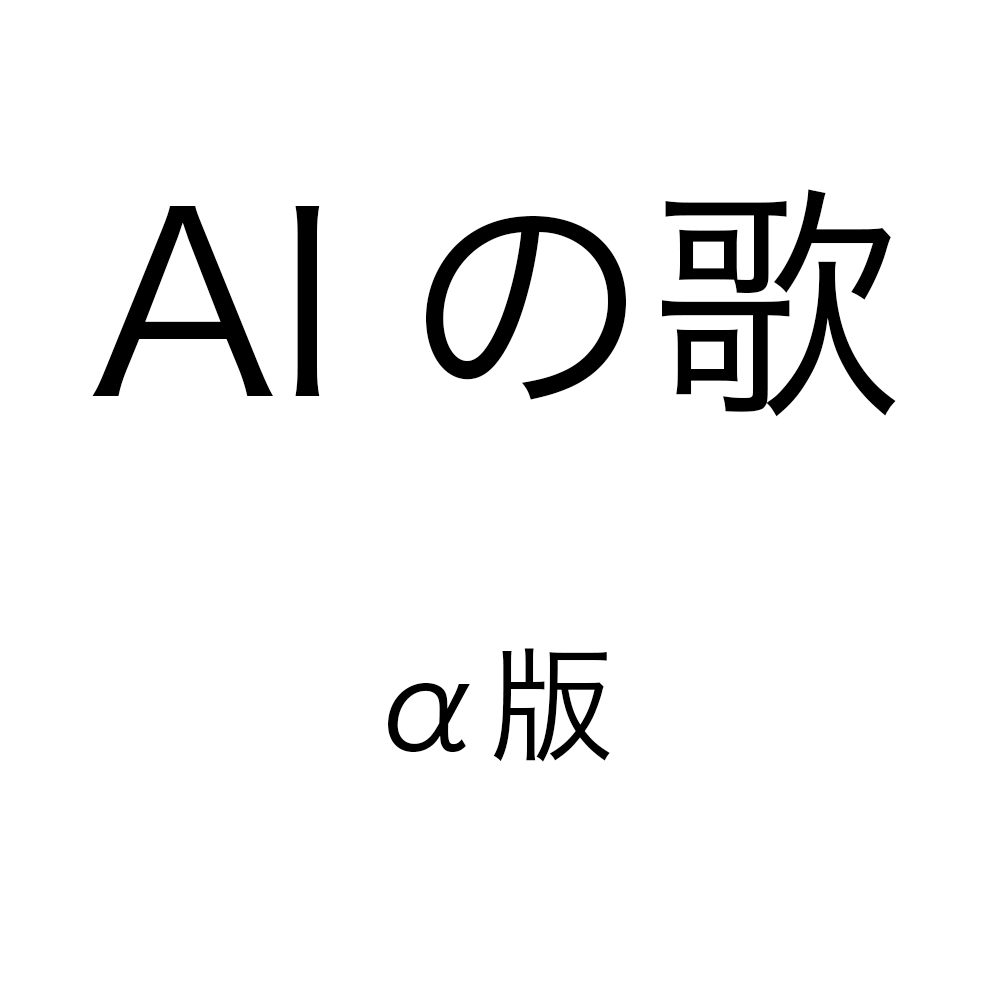
<style>
.page{position:relative;width:1000px;height:1000px;background:#ffffff}
.page>*{position:absolute;margin:0}
.t1{font:250px "HiraKakuProN-W3";color:#000000}
.t2{font:125px "HiraKakuProN-W3";color:#000000}
</style>
<div class="page">
<p class="t1" style="left:92px;top:189px;width:804px;height:228px">AIの歌</p>
<p class="t2" style="left:388px;top:648px;width:222px;height:114px">α版</p>
</div>
